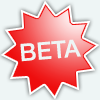
<style>
.page{position:relative;width:100px;height:100px;background:#eef5f5}
.page>*{position:absolute;margin:0}
.t1{font:24px "HelveticaNeueLTPro-Md";letter-spacing:0.01em;color:#eef5f5}
</style>
<div class="page">
<p class="t1" style="left:20px;top:39px;width:61px;height:23px;rotate:-5deg">BETA</p>
</div>
